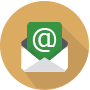
<style>
.page{position:relative;width:90px;height:90px;background:#dbab62}
.page>*{position:absolute;margin:0}
.t1{font:28px "MSReferenceSansSerif";color:#ffffff}
</style>
<div class="page">
<p class="t1" style="left:32px;top:28px;width:25px;height:24px">@</p>
</div>
